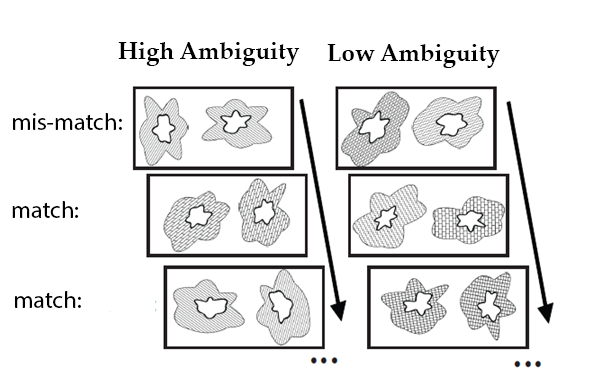
<style>
.page{position:relative;width:600px;height:377px;background:#ffffff}
.page>*{position:absolute;margin:0}
.t1{font:24px "PalatinoLinotype-Bold";color:#000000}
.t2{font:24px "MyriadPro-Regular";color:#000000}
</style>
<div class="page">
<p class="t1" style="left:118px;top:42px;width:182px;height:24px">High Ambiguity</p>
<p class="t1" style="left:327px;top:44px;width:173px;height:24px">Low Ambiguity</p>
<p class="t2" style="left:13px;top:113px;width:109px;height:17px">mis-match:</p>
<p class="t2" style="left:12px;top:201px;width:67px;height:17px">match:</p>
<p class="t2" style="left:15px;top:291px;width:66px;height:17px">match:</p>
</div>
